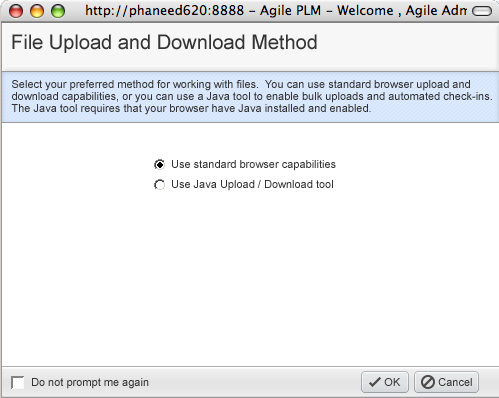
<style>
.page{position:relative;width:499px;height:398px;background:#ffffff}
.page>*{position:absolute;margin:0}
.t1{font:20px "ArialMT";color:#333333}
.t2{font:11px/12px "ArialMT";color:#333333}
.t3{font:11px "ArialMT";color:#333333}
</style>
<div class="page">
<p class="t1" style="left:12px;top:34px;width:305px;height:19px">File Upload and Download Method</p>
<p class="t2" style="left:11px;top:80px;width:481px;height:35px">Select your preferred method for working with files.  You can use standard browser upload and<br>download capabilities, or you can use a Java tool to enable bulk uploads and automated check-ins.<br>The Java tool requires that your browser have Java installed and enabled.</p>
<p class="t3" style="left:172px;top:160px;width:164px;height:11px">Use standard browser capabilities</p>
<p class="t3" style="left:172px;top:180px;width:161px;height:11px">Use Java Upload / Download tool</p>
<p class="t3" style="left:32px;top:378px;width:117px;height:11px">Do not prompt me again</p>
<p class="t3" style="left:384px;top:378px;width:17px;height:8px">OK</p>
<p class="t3" style="left:438px;top:378px;width:34px;height:8px">Cancel</p>
</div>
